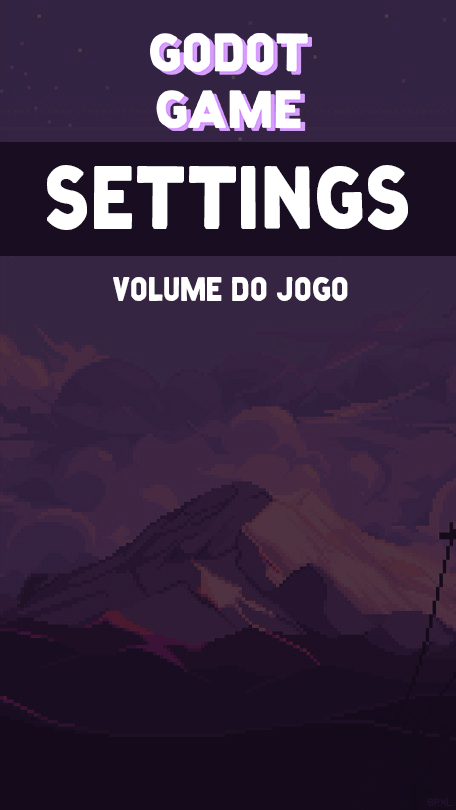
<style>
.page{position:relative;width:456px;height:810px}
.page>*{position:absolute;margin:0}
.t1{font:79.1px "Marquee-Regular";color:#ffffff;scale:0.9 1}
.t2{font:30.2px "Marquee-Regular";color:#ffffff;scale:0.9 1}
</style>
<div class="page">
<p class="t1" style="left:47px;top:165px;width:361px;height:65px">SETTINGS</p>
<p class="t2" style="left:113px;top:277px;width:235px;height:24px">VOLUME DO JOGO</p>
</div>
